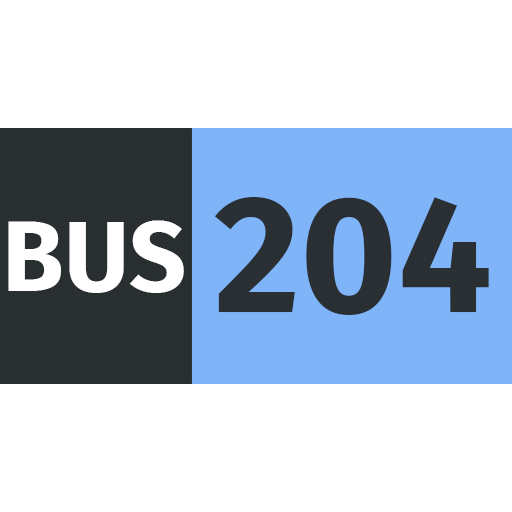
<style>
.page{position:relative;width:512px;height:512px;background:#ffffff}
.page>*{position:absolute;margin:0}
.t1{font:166.7px "FiraSans-Bold";color:#292f33}
.t2{font:100px "FiraSans-Bold";color:#ffffff}
</style>
<div class="page">
<p class="t1" style="left:215px;top:197px;width:274px;height:118px">204</p>
<p class="t2" style="left:8px;top:220px;width:176px;height:73px">BUS</p>
</div>
